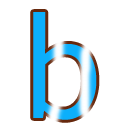
<style>
.page{position:relative;width:128px;height:128px;background:#ffffff}
.page>*{position:absolute;margin:0}
.t1{font:132.9px "SourceHanSansCN-Regular";color:#0caffb}
</style>
<div class="page">
<p class="t1" style="left:33px;top:12px;width:64px;height:108px">b</p>
</div>
